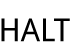
<style>
.page{position:relative;width:70px;height:55px;background:#ffffff}
.page>*{position:absolute;margin:0}
.t1{font:31.8px "DroidSans";color:#000000}
</style>
<div class="page">
<p class="t1" style="left:1px;top:18px;width:69px;height:24px">HALT</p>
</div>
